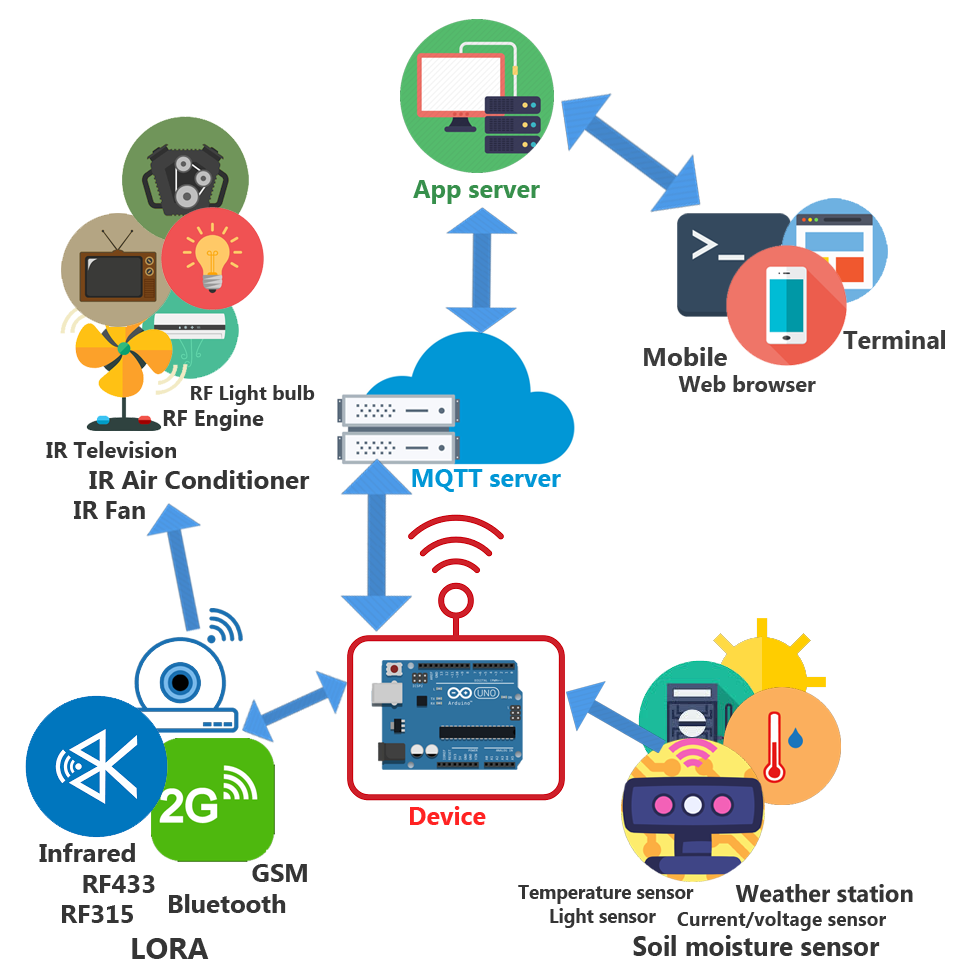
<style>
.page{position:relative;width:960px;height:980px;background:#ffffff}
.page>*{position:absolute;margin:0}
.t1{font:25px "SegoeUI-Bold";color:#37904c}
.t2{font:25px "SegoeUI-Bold";color:#3c3c3c}
.t3{font:22px "SegoeUI-Bold";color:#3c3c3c}
.t4{font:26px "SegoeUI-Bold";color:#3c3c3c}
.t5{font:20px "SegoeUI-Bold";color:#353535}
.t6{font:22px "SegoeUI-Bold";color:#353535}
.t7{font:26px "SegoeUI-Bold";color:#353535}
.t8{font:25px "SegoeUI-Bold";color:#353535}
.t9{font:25px "SegoeUI-Bold";color:#0197d6}
.t10{font:25px "SegoeUI-Bold";color:#ff2323}
.t11{font:25.6px "SegoeUI-Bold";color:#353535}
.t12{font:30px "SegoeUI-Bold";color:#353535}
.t13{font:19.9px "SegoeUI-Bold";color:#353535;scale:0.94 1}
.t14{font:27.6px "SegoeUI-Bold";color:#353535;scale:0.94 1}
.t15{font:19.7px "SegoeUI-Bold";color:#353535}
.t16{font:24.1px "SegoeUI-Bold";color:#353535}
</style>
<div class="page">
<p class="t1" style="left:413px;top:180px;width:127px;height:24px">App server</p>
<p class="t2" style="left:843px;top:330px;width:102px;height:19px">Terminal</p>
<p class="t3" style="left:644px;top:347px;width:172px;height:45px"><span class="t4">Mobile<br></span>      Web browser</p>
<p class="t5" style="left:163px;top:385px;width:152px;height:46px">RF Light bulb<br><span class="t6">RF Engine</span></p>
<p class="t7" style="left:46px;top:441px;width:264px;height:78px"><span class="t6">IR Television<br></span>      IR Air Conditioner<br><span class="t8">    IR Fan</span></p>
<p class="t9" style="left:412px;top:469px;width:149px;height:23px">MQTT server</p>
<p class="t10" style="left:410px;top:806px;width:76px;height:19px">Device</p>
<p class="t11" style="left:39px;top:843px;width:170px;height:116px">Infrared<br>      RF433<br>   RF315<br><span class="t12">           LORA</span></p>
<p class="t11" style="left:169px;top:864px;width:138px;height:49px">GSM<br>Bluetooth</p>
<p class="t13" style="left:518px;top:885px;width:362px;height:71px">Temperature sensor<br>      Light sensor<br><span class="t14">                Soil moisture sensor</span></p>
<p class="t15" style="left:677px;top:884px;width:236px;height:47px"><span class="t16">         Weather station<br></span>Current/voltage sensor</p>
</div>
